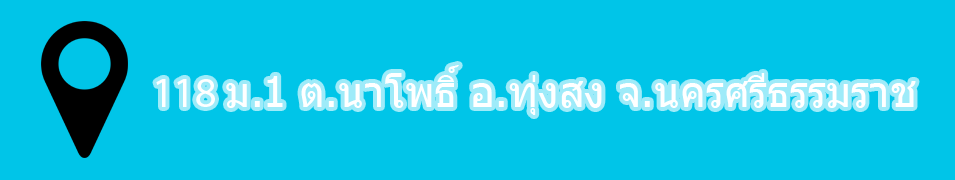
<style>
.page{position:relative;width:955px;height:180px;background:#00c5e8}
.page>*{position:absolute;margin:0}
.t1{font:42px "Tahoma";color:#ffffff}
.t2{font:42px "MyriadPro-Regular";color:#ffffff}
</style>
<div class="page">
<p class="t1" style="left:156px;top:65px;width:760px;height:50px"><span class="t2">118 </span>ม.1 ต.นาโพธิ์ อ.ทุ่งสง จ.นครศรีธรรมราช</p>
</div>
